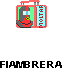
<style>
.page{position:relative;width:62px;height:68px;background:#ffffff}
.page>*{position:absolute;margin:0}
.t1{font:10.3px "Arial-BoldMT";color:#000000;scale:1.11 1}
</style>
<div class="page">
<p class="t1" style="left:0px;top:61px;width:62px;height:7px">FIAMBRERA</p>
</div>
